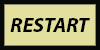
<style>
.page{position:relative;width:100px;height:50px;background:#e3e09d}
.page>*{position:absolute;margin:0}
.t1{font:20.7px "MyriadPro-BoldIt";color:#000000}
</style>
<div class="page">
<p class="t1" style="left:10px;top:18px;width:80px;height:14px">RESTART</p>
</div>
